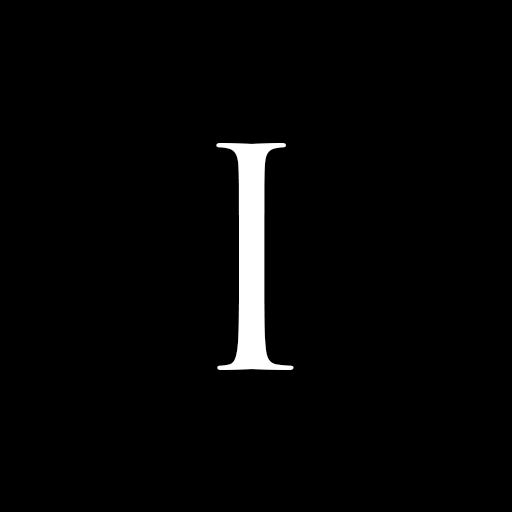
<style>
.page{position:relative;width:512px;height:512px;background:#000000}
.page>*{position:absolute;margin:0}
.t1{font:300px "TrajanPro-Regular";color:#ffffff}
</style>
<div class="page">
<p class="t1" style="left:216px;top:143px;width:78px;height:228px">I</p>
</div>
